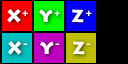
<style>
.page{position:relative;width:128px;height:64px;background:#000000}
.page>*{position:absolute;margin:0}
.t1{font:17.5px "LithosPro-Black";letter-spacing:0.05em;color:#ffffff;scale:1.05 1}
</style>
<div class="page">
<p class="t1" style="left:7px;top:9px;width:21px;height:14px">X+</p>
<p class="t1" style="left:39px;top:9px;width:21px;height:13px">Y+</p>
<p class="t1" style="left:71px;top:9px;width:21px;height:14px">Z+</p>
<p class="t1" style="left:7px;top:41px;width:21px;height:14px">X-</p>
<p class="t1" style="left:40px;top:41px;width:20px;height:13px">Y-</p>
<p class="t1" style="left:72px;top:41px;width:19px;height:14px">Z-</p>
</div>
